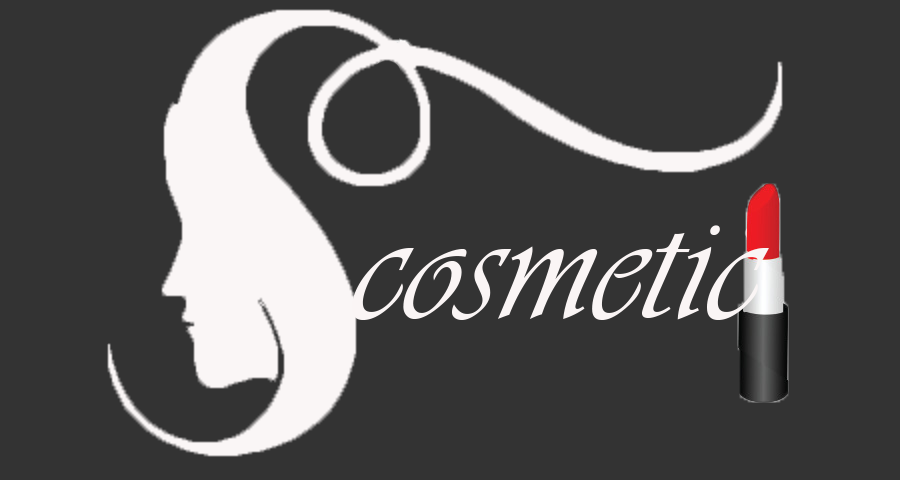
<style>
.page{position:relative;width:900px;height:480px;background:#333333}
.page>*{position:absolute;margin:0}
.t1{font:172px "Vivaldii";color:#faf5f5}
</style>
<div class="page">
<p class="t1" style="left:352px;top:225px;width:417px;height:95px">cosmetic</p>
</div>
